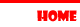
<style>
.page{position:relative;width:80px;height:27px;background:#ffffff}
.page>*{position:absolute;margin:0}
.t1{font:14px "ShowcardGothic-Reg";color:#ff0000}
</style>
<div class="page">
<p class="t1" style="left:37px;top:10px;width:40px;height:12px">HOME</p>
</div>
